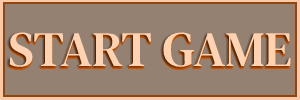
<style>
.page{position:relative;width:300px;height:100px;background:#958172}
.page>*{position:absolute;margin:0}
.t1{font:49.4px "DMSerifText-Regular"}
.t2{font:49.4px "DMSerifText-Regular";color:#ffd2b2}
</style>
<div class="page">
<p class="t1" style="left:8px;top:35px;width:282px;height:35px">START GAME</p>
<p class="t1" style="left:8px;top:35px;width:282px;height:35px">START GAME</p>
<p class="t2" style="left:9px;top:33px;width:282px;height:35px">START GAME</p>
<p class="t2" style="left:9px;top:34px;width:282px;height:35px">START GAME</p>
<p class="t2" style="left:9px;top:32px;width:282px;height:35px">START GAME</p>
</div>
